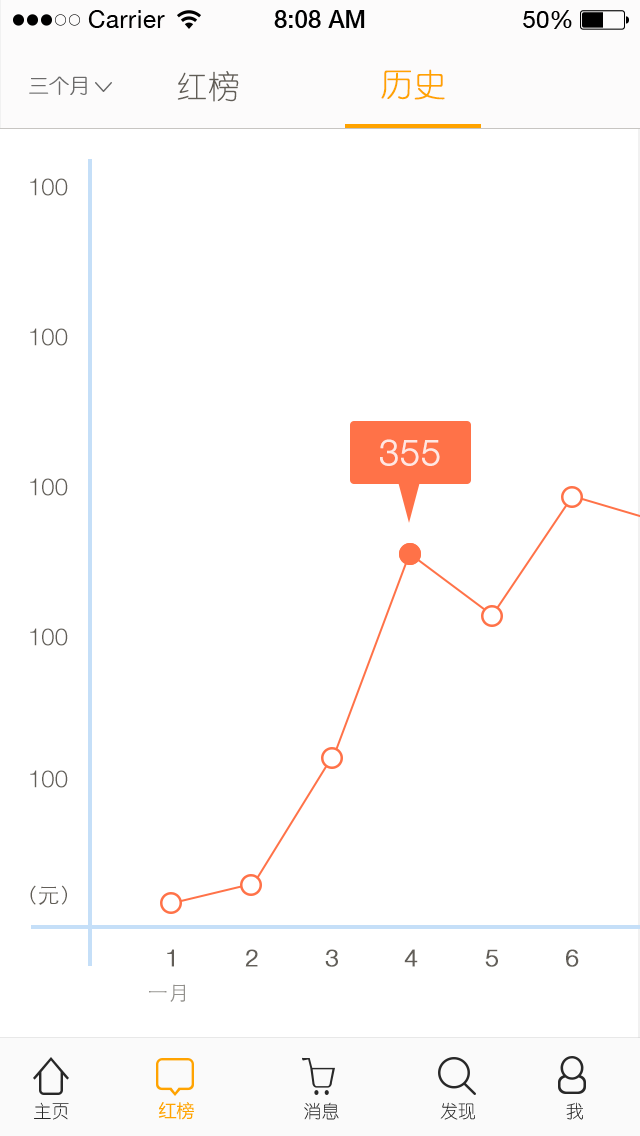
<style>
.page{position:relative;width:640px;height:1136px;background:#ffffff}
.page>*{position:absolute;margin:0}
.t1{font:20px "YouYuan";color:#6c6b6b;text-transform:uppercase;font-weight:bold}
.t2{font:32px "YouYuan";color:#615d56;text-transform:uppercase}
.t3{font:32px "YouYuan";color:#ffa300;text-transform:uppercase;font-weight:bold}
.t4{font:24px "HelveticaNeueLTPro-Lt";color:#625e58;text-transform:uppercase}
.t5{font:36px "HelveticaNeueLTPro-Lt";color:#ffe7e2;text-transform:uppercase;font-weight:bold}
.t6{font:22px "STHeitiSC-Light";color:#625e58;text-transform:uppercase}
.t7{font:24px "HelveticaNeueLTPro-Lt";color:#625e58;text-transform:uppercase;font-weight:bold}
.t8{font:20px "STHeitiSC-Light";color:#93918d;text-transform:uppercase}
.t9{font:18px "YouYuan";color:#282828;text-transform:uppercase}
.t10{font:18px "MicrosoftYaHei";color:#ffa300;text-transform:uppercase}
.t11{font:18px "YouYuan";text-transform:uppercase}
</style>
<div class="page">
<p class="t1" style="left:29px;top:76px;width:58px;height:19px">三个月</p>
<p class="t2" style="left:177px;top:71px;width:62px;height:31px">红榜</p>
<p class="t3" style="left:381px;top:69px;width:64px;height:31px">历史</p>
<p class="t4" style="left:30px;top:178px;width:38px;height:18px">100</p>
<p class="t4" style="left:30px;top:328px;width:38px;height:18px">100</p>
<p class="t5" style="left:380px;top:439px;width:60px;height:27px">355</p>
<p class="t4" style="left:30px;top:478px;width:38px;height:18px">100</p>
<p class="t4" style="left:30px;top:628px;width:38px;height:18px">100</p>
<p class="t4" style="left:30px;top:770px;width:38px;height:18px">100</p>
<p class="t6" style="left:30px;top:885px;width:37px;height:20px">（元）</p>
<p class="t7" style="left:167px;top:949px;width:7px;height:18px">1</p>
<p class="t7" style="left:245px;top:949px;width:13px;height:18px">2</p>
<p class="t7" style="left:325px;top:949px;width:13px;height:18px">3</p>
<p class="t7" style="left:404px;top:949px;width:14px;height:18px">4</p>
<p class="t7" style="left:485px;top:949px;width:13px;height:18px">5</p>
<p class="t7" style="left:566px;top:949px;width:13px;height:18px">6</p>
<p class="t8" style="left:149px;top:984px;width:36px;height:18px">一月</p>
<p class="t9" style="left:34px;top:1102px;width:35px;height:18px">主页</p>
<p class="t10" style="left:158px;top:1102px;width:36px;height:18px">红榜</p>
<p class="t11" style="left:304px;top:1102px;width:35px;height:18px">消息</p>
<p class="t9" style="left:440px;top:1102px;width:35px;height:18px">发现</p>
<p class="t9" style="left:566px;top:1102px;width:17px;height:18px">我</p>
</div>
